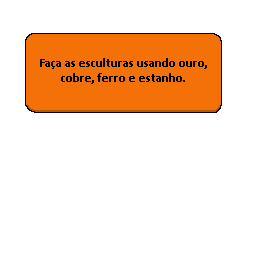
<style>
.page{position:relative;width:256px;height:256px;background:#ffffff}
.page>*{position:absolute;margin:0}
.t1{font:12.5px "Calibri-Bold";color:#000000}
</style>
<div class="page">
<p class="t1" style="left:40px;top:58px;width:167px;height:26px;text-align:center">Faça as esculturas usando ouro, cobre, ferro e estanho.</p>
</div>
